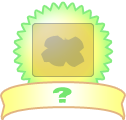
<style>
.page{position:relative;width:126px;height:120px;background:#ffffff}
.page>*{position:absolute;margin:0}
.t1{font:19.5px "Arial-Black";letter-spacing:0.045em;color:#75e66f;text-transform:uppercase}
</style>
<div class="page">
<p class="t1" style="left:53px;top:87px;width:19px;height:16px">?</p>
</div>
